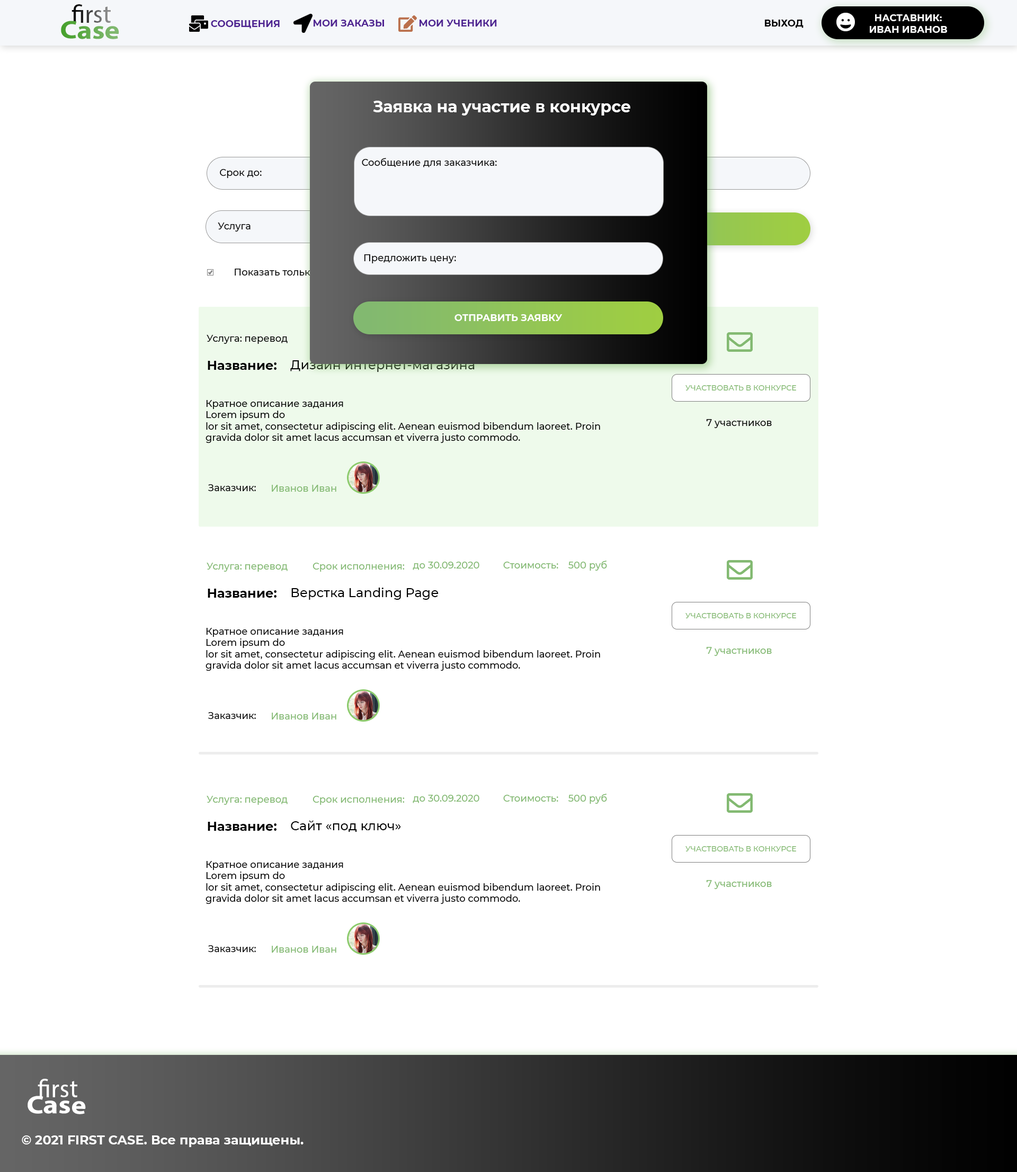
<style>
.page{position:relative;width:1017px;height:1172px;background:#ffffff}
.page>*{position:absolute;margin:0}
.t1{font:25.4px "MyriadPro-Regular"}
.t2{font:9.5px "Montserrat-Bold";color:#ffffff;text-transform:uppercase}
.t3{font:25.4px "MyriadPro-Bold";scale:1.13 1}
.t4{font:25.4px "MyriadPro-Regular";scale:1.13 1}
.t5{font:9.5px "Montserrat-Bold";color:#4f2492;text-transform:uppercase}
.t6{font:9.5px "Montserrat-Bold";color:#502492;text-transform:uppercase}
.t7{font:9.5px "Montserrat-Bold";color:#000000;text-transform:uppercase}
.t8{font:15.9px "Montserrat-Bold";color:#ffffff}
.t9{font:9.5px "Montserrat-Medium";color:#000000}
.t10{font:9.5px "Montserrat-Medium"}
.t11{font:12.7px "Montserrat-Bold";color:#000000}
.t12{font:12.7px "Montserrat-Medium"}
.t13{font:7.4px "Montserrat-Medium";color:#82b970;text-transform:uppercase}
.t14{font:9.5px "Montserrat-Medium";color:#82b971}
.t15{font:12.7px "Montserrat-Medium";color:#000000}
.t16{font:25.4px "MyriadPro-Regular";color:#ffffff}
.t17{font:25.4px "MyriadPro-Bold";color:#ffffff;scale:1.13 1}
.t18{font:25.4px "MyriadPro-Regular";color:#ffffff;scale:1.13 1}
.t19{font:12.7px "Montserrat-Bold";color:#ffffff}
</style>
<div class="page">
<p class="t1" style="left:72px;top:4px;width:39px;height:19px">first</p>
<p class="t2" style="left:870px;top:14px;width:77px;height:19px;text-align:center">наставник:<br>иВАН иВАНОВ</p>
<p class="t3" style="left:61px;top:21px;width:58px;height:18px;rotate:1deg"><span class="t4">       </span>Case</p>
<p class="t5" style="left:211px;top:20px;width:69px;height:9px">СООБЩЕНИЯ</p>
<p class="t6" style="left:314px;top:20px;width:70px;height:6px">МОИ ЗАКАЗЫ</p>
<p class="t5" style="left:420px;top:20px;width:77px;height:6px">мои ученики</p>
<p class="t7" style="left:765px;top:20px;width:39px;height:8px">ВЫХОД</p>
<p class="t8" style="left:373px;top:101px;width:258px;height:15px">Заявка на участие в конкурсе</p>
<p class="t9" style="left:362px;top:158px;width:135px;height:9px">Сообщение для заказчика:</p>
<p class="t9" style="left:220px;top:169px;width:42px;height:9px">Срок до:</p>
<p class="t9" style="left:218px;top:223px;width:33px;height:9px">Услуга</p>
<p class="t9" style="left:364px;top:254px;width:92px;height:9px">Предложить цену:</p>
<p class="t10" style="left:235px;top:269px;width:184px;height:8px">Показать только мои специальности</p>
<p class="t2" style="left:455px;top:314px;width:108px;height:7px">ОТПРАВИТЬ ЗАЯВКУ</p>
<p class="t9" style="left:207px;top:335px;width:81px;height:9px">Услуга: перевод</p>
<p class="t11" style="left:208px;top:361px;width:69px;height:9px">Название:</p>
<p class="t12" style="left:290px;top:359px;width:185px;height:13px">Дизайн интернет-магазина</p>
<p class="t13" style="left:686px;top:385px;width:110px;height:6px">Участвовать в конкурсе</p>
<p class="t9" style="left:206px;top:400px;width:394px;height:43px">Кратное описание задания<br>Lorem ipsum do<br>lor sit amet, consectetur adipiscing elit. Aenean euismod bibendum laoreet. Proin gravida dolor sit amet lacus accumsan et viverra justo commodo.</p>
<p class="t9" style="left:706px;top:419px;width:66px;height:9px">7 участников</p>
<p class="t9" style="left:208px;top:484px;width:48px;height:7px">Заказчик:</p>
<p class="t14" style="left:272px;top:485px;width:64px;height:7px">Иванов Иван</p>
<p class="t14" style="left:207px;top:563px;width:81px;height:9px">Услуга: перевод</p>
<p class="t14" style="left:313px;top:563px;width:92px;height:9px">Срок исполнения:</p>
<p class="t14" style="left:413px;top:562px;width:67px;height:8px">до 30.09.2020</p>
<p class="t14" style="left:503px;top:562px;width:55px;height:7px">Стоимость:</p>
<p class="t14" style="left:569px;top:561px;width:38px;height:10px">500 руб</p>
<p class="t11" style="left:208px;top:589px;width:69px;height:9px">Название:</p>
<p class="t15" style="left:291px;top:588px;width:148px;height:12px">Верстка Landing Page</p>
<p class="t13" style="left:686px;top:613px;width:110px;height:5px">Участвовать в конкурсе</p>
<p class="t9" style="left:206px;top:628px;width:394px;height:43px">Кратное описание задания<br>Lorem ipsum do<br>lor sit amet, consectetur adipiscing elit. Aenean euismod bibendum laoreet. Proin gravida dolor sit amet lacus accumsan et viverra justo commodo.</p>
<p class="t14" style="left:706px;top:647px;width:66px;height:9px">7 участников</p>
<p class="t9" style="left:208px;top:712px;width:48px;height:7px">Заказчик:</p>
<p class="t14" style="left:272px;top:713px;width:64px;height:7px">Иванов Иван</p>
<p class="t14" style="left:207px;top:796px;width:81px;height:9px">Услуга: перевод</p>
<p class="t14" style="left:313px;top:796px;width:92px;height:9px">Срок исполнения:</p>
<p class="t14" style="left:413px;top:795px;width:67px;height:8px">до 30.09.2020</p>
<p class="t14" style="left:503px;top:795px;width:55px;height:7px">Стоимость:</p>
<p class="t14" style="left:569px;top:794px;width:38px;height:10px">500 руб</p>
<p class="t11" style="left:208px;top:822px;width:69px;height:9px">Название:</p>
<p class="t15" style="left:291px;top:820px;width:110px;height:12px">Сайт «под ключ»</p>
<p class="t13" style="left:686px;top:846px;width:110px;height:6px">Участвовать в конкурсе</p>
<p class="t9" style="left:206px;top:861px;width:394px;height:43px">Кратное описание задания<br>Lorem ipsum do<br>lor sit amet, consectetur adipiscing elit. Aenean euismod bibendum laoreet. Proin gravida dolor sit amet lacus accumsan et viverra justo commodo.</p>
<p class="t14" style="left:706px;top:880px;width:66px;height:9px">7 участников</p>
<p class="t9" style="left:208px;top:945px;width:48px;height:7px">Заказчик:</p>
<p class="t14" style="left:272px;top:946px;width:64px;height:7px">Иванов Иван</p>
<p class="t16" style="left:38px;top:1079px;width:39px;height:18px">first</p>
<p class="t17" style="left:28px;top:1096px;width:58px;height:18px;rotate:1deg"><span class="t18">       </span>Case</p>
<p class="t19" style="left:22px;top:1136px;width:282px;height:11px">© 2021 FIRST CASE. Все права защищены.</p>
</div>
